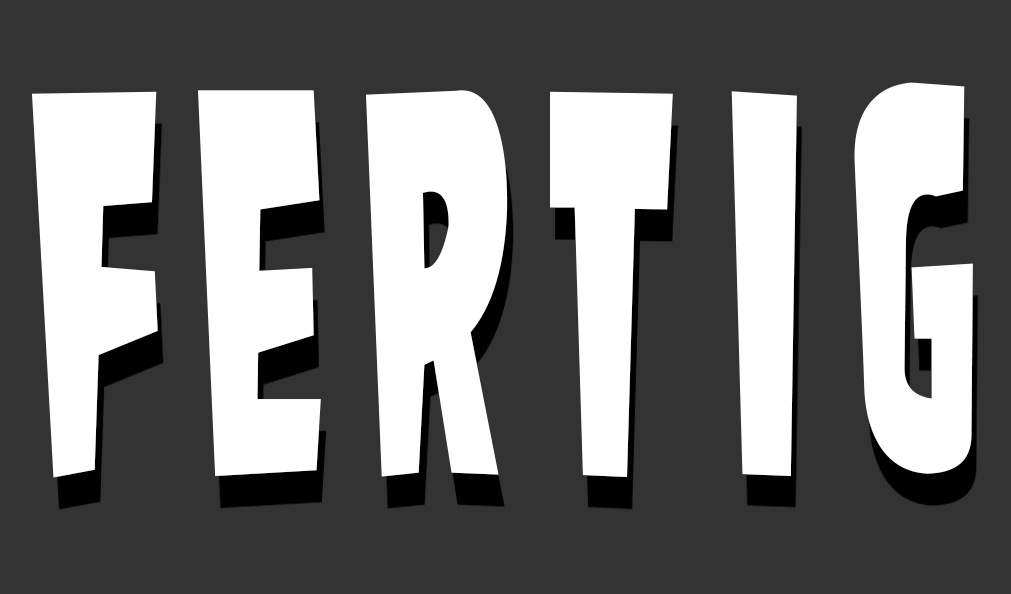
<style>
.page{position:relative;width:1011px;height:594px;background:#333333}
.page>*{position:absolute;margin:0}
.t1{font:483.9px "Samdan";letter-spacing:0.1em;color:#ffffff;scale:0.74 1}
</style>
<div class="page">
<p class="t1" style="left:32px;top:82px;width:941px;height:396px">fertig</p>
</div>
